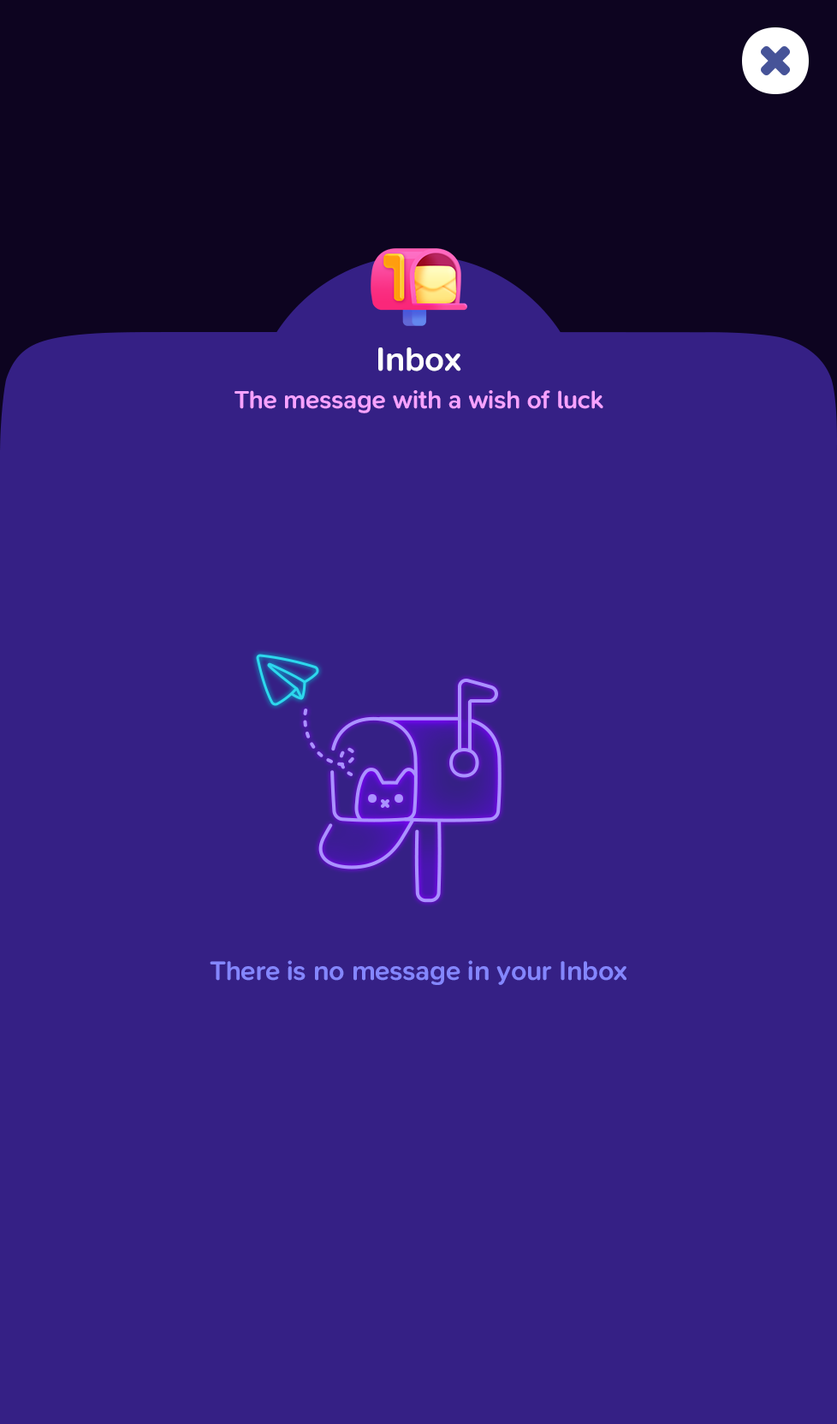
<style>
.page{position:relative;width:837px;height:1424px;background:#352085}
.page>*{position:absolute;margin:0}
.t1{font:34.2px "SNPro-SemiBold";letter-spacing:-0.01em;color:#ffffff}
.t2{font:25.7px "SNPro-SemiBold";letter-spacing:-0.01em;color:#f7a2ff}
.t3{font:27.4px "SNPro-SemiBold";letter-spacing:-0.01em;color:#8486ff}
</style>
<div class="page">
<p class="t1" style="left:378px;top:348px;width:83px;height:24px">Inbox</p>
<p class="t2" style="left:235px;top:390px;width:368px;height:23px">The message with a wish of luck</p>
<p class="t3" style="left:210px;top:960px;width:417px;height:25px">There is no message in your Inbox</p>
</div>
